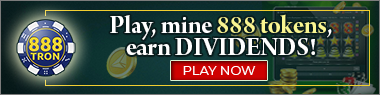
<style>
.page{position:relative;width:380px;height:95px}
.page>*{position:absolute;margin:0}
.t1{font:27px/22px "ArnoPro-BoldDisplay";color:#ffffff}
.t2{font:27px/22px "ArnoPro-BoldDisplay";color:#f9f591}
.t3{font:13px "Montserrat-Regular";color:#ffffff;text-transform:uppercase}
</style>
<div class="page">
<p class="t1" style="left:110px;top:14px;width:222px;height:41px;text-align:center">Play, mine <span class="t2">888 tokens</span>,<br>earn DIVIDENDS!</p>
<p class="t3" style="left:183px;top:66px;width:73px;height:9px">play now</p>
</div>
